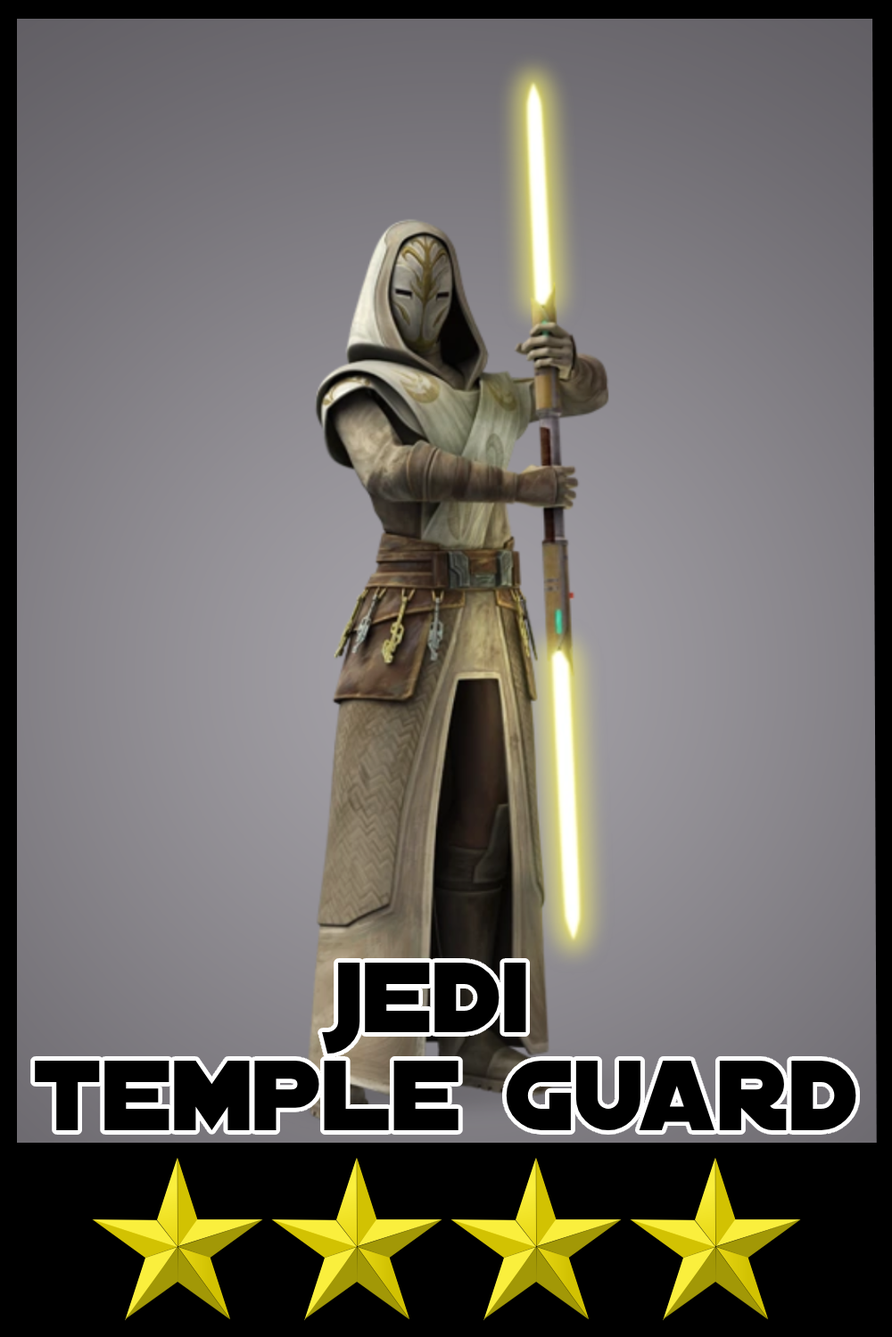
<style>
.page{position:relative;width:892px;height:1337px}
.page>*{position:absolute;margin:0}
.t1{font:107.1px/98.2px "DistantGalaxy";color:#000000}
</style>
<div class="page">
<p class="t1" style="left:35px;top:963px;width:821px;height:168px;text-align:center">jedi <br>temple guard</p>
</div>
